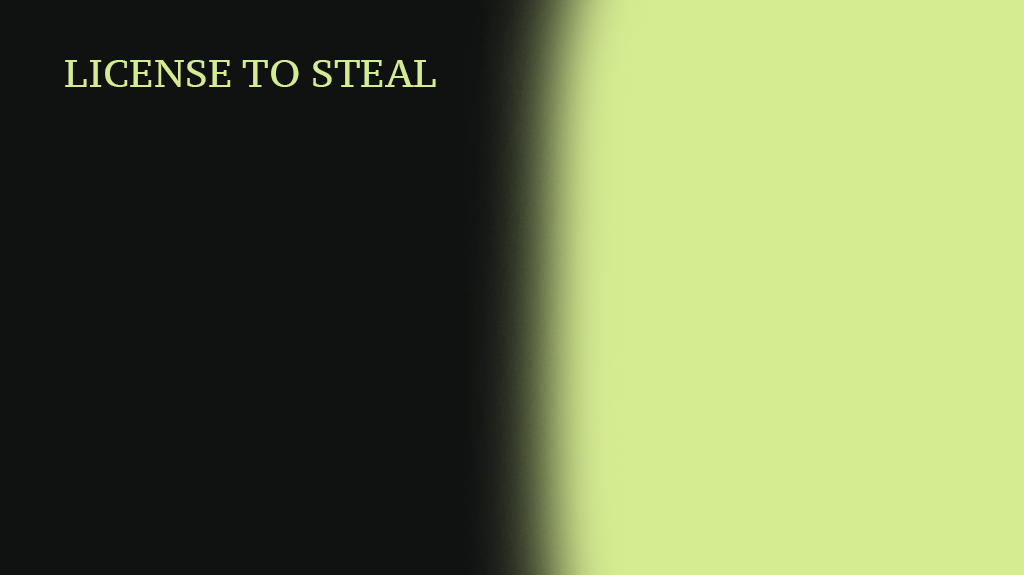
<style>
.page{position:relative;width:1024px;height:575px;background:#101212}
.page>*{position:absolute;margin:0}
.t1{font:38px "PTSerif-Caption";color:#d5ec91}
</style>
<div class="page">
<p class="t1" style="left:65px;top:60px;width:371px;height:27px">LICENSE TO STEAL</p>
</div>
